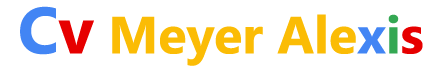
<style>
.page{position:relative;width:440px;height:70px;background:#ffffff}
.page>*{position:absolute;margin:0}
.t1{font:52.2px "SegoeUI-Bold";color:#fbbc05}
.t2{font:65.3px "SegoeUI-Bold";color:#4285f4}
.t3{font:65.3px "SegoeUI-Bold";color:#e60000}
.t4{font:52.2px "SegoeUI-Bold";color:#4285f4}
.t5{font:52.2px "SegoeUI-Bold";color:#34a853}
.t6{font:52.2px "SegoeUI-Bold";color:#e60000}
</style>
<div class="page">
<p class="t1" style="left:20px;top:6px;width:403px;height:60px"><span class="t2">C</span><span class="t3">v </span>Meyer Ale<span class="t4">x</span><span class="t5">i</span><span class="t6">s</span></p>
</div>
